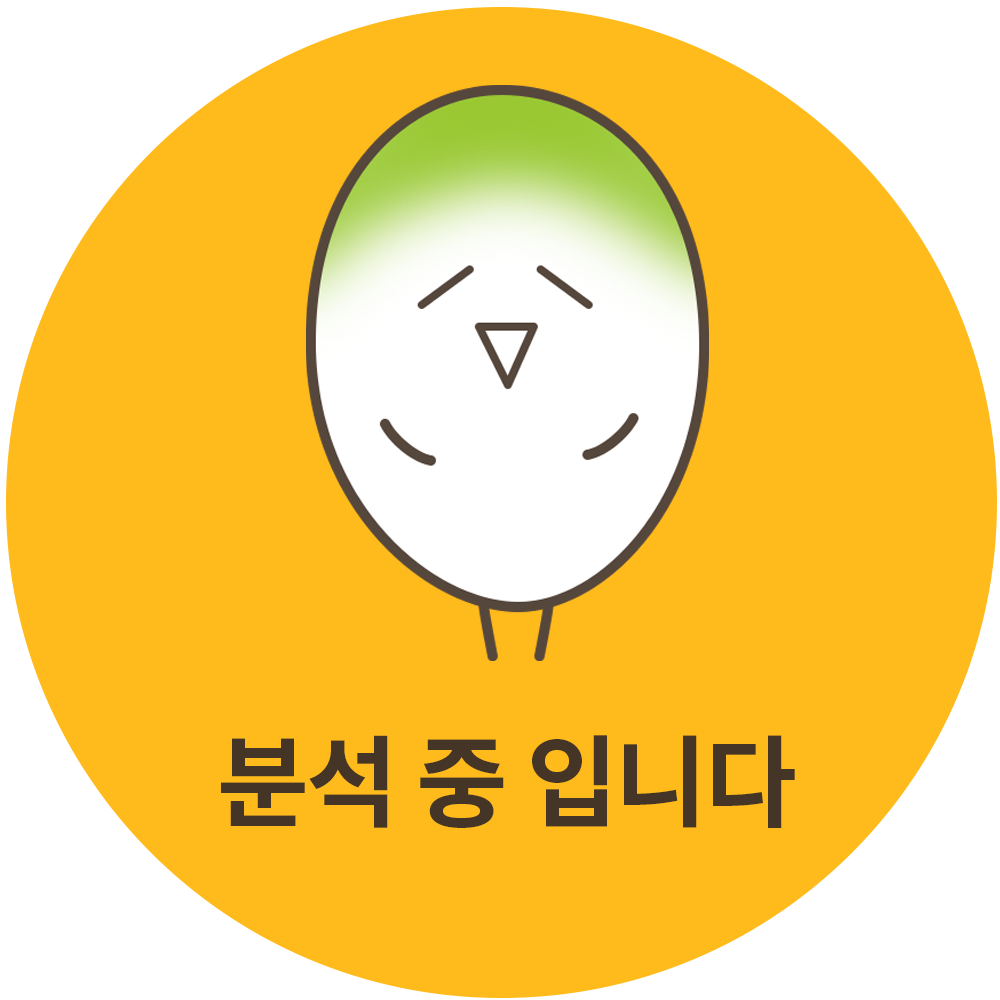
<style>
.page{position:relative;width:1000px;height:1000px;background:#ffba1b}
.page>*{position:absolute;margin:0}
.t1{font:100px "NotoSansKR-Bold";letter-spacing:-0.025em;color:#453526}
</style>
<div class="page">
<p class="t1" style="left:221px;top:735px;width:574px;height:93px">분석 중 입니다</p>
</div>
